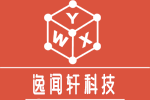
<style>
.page{position:relative;width:150px;height:100px;background:#db533e}
.page>*{position:absolute;margin:0}
.t1{font:22.2px "MFYueYuan_Noncommercial-Regular";letter-spacing:0.24em;color:#ffffff;font-weight:bold;scale:0.62 1}
</style>
<div class="page">
<p class="t1" style="left:33px;top:73px;width:82px;height:22px">逸闻轩科技</p>
</div>
